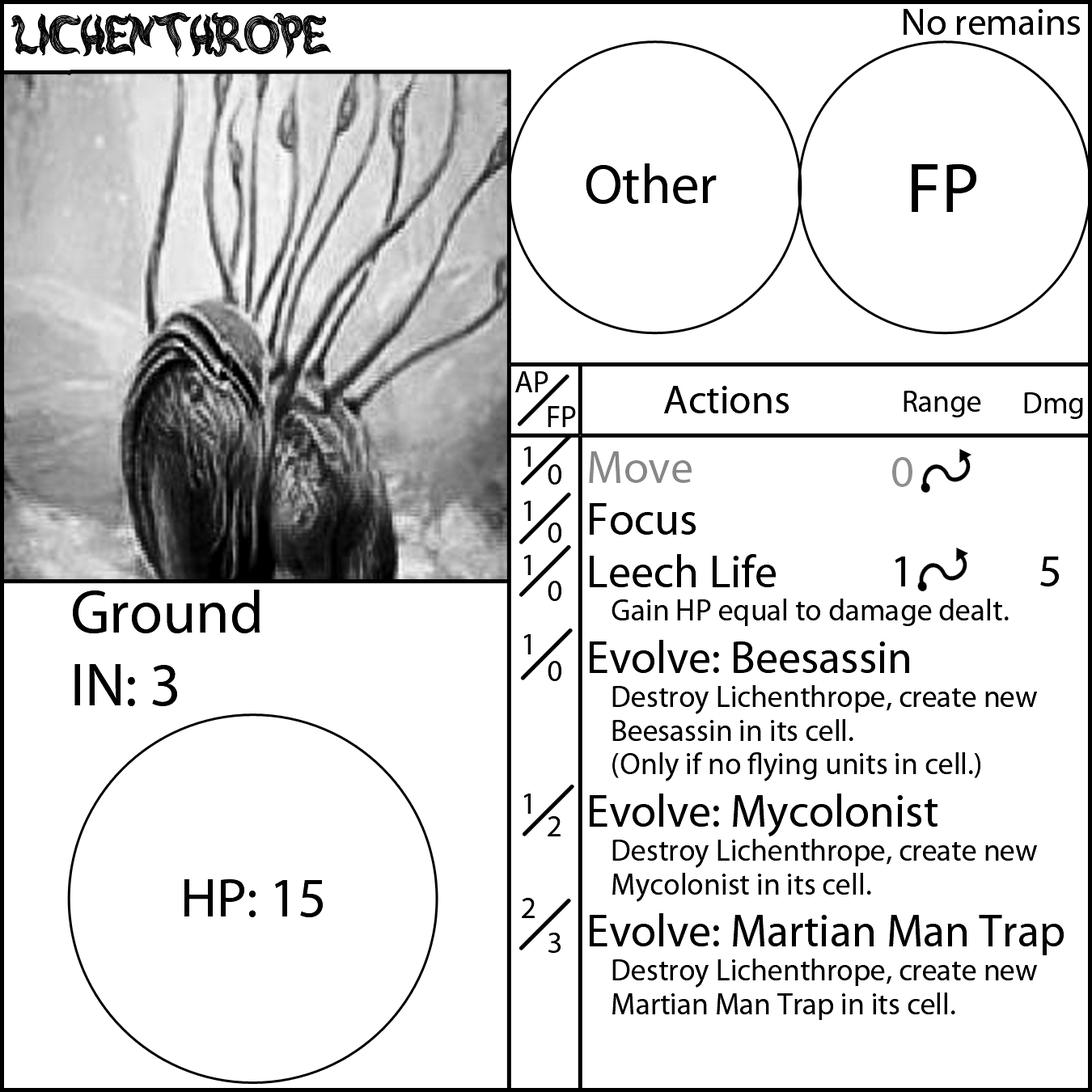
<style>
.page{position:relative;width:1092px;height:1092px;background:#ffffff}
.page>*{position:absolute;margin:0}
.t1{font:55.6px "rambutkusut";color:#000000}
.t2{font:37.9px "MyriadPro-Regular";color:#000000}
.t3{font:55.6px "MyriadPro-Regular";color:#000000}
.t4{font:70.8px "MyriadPro-Regular";color:#000000}
.t5{font:30.3px "MyriadPro-Regular";color:#000000}
.t6{font:40.4px "MyriadPro-Regular";color:#000000}
.t7{font:45.5px "MyriadPro-Regular";color:#949494}
.t8{font:45.5px "MyriadPro-Regular";color:#000000}
.t9{font:45.5px "MyriadPro-Regular";color:#9a9a9a}
.t10{font:60.7px "MyriadPro-Regular";color:#000000}
</style>
<div class="page">
<p class="t1" style="left:11px;top:12px;width:320px;height:46px">Lichenthrope</p>
<p class="t2" style="left:904px;top:9px;width:176px;height:26px">No remains</p>
<p class="t3" style="left:586px;top:163px;width:131px;height:41px">Other</p>
<p class="t4" style="left:912px;top:164px;width:64px;height:48px">FP</p>
<p class="t5" style="left:515px;top:371px;width:33px;height:21px">AP</p>
<p class="t6" style="left:664px;top:386px;width:125px;height:27px">Actions</p>
<p class="t5" style="left:904px;top:391px;width:77px;height:26px">Range</p>
<p class="t5" style="left:1024px;top:392px;width:59px;height:27px">Dmg</p>
<p class="t5" style="left:548px;top:406px;width:28px;height:21px">FP</p>
<p class="t5" style="left:522px;top:447px;width:13px;height:471px">1<br>1<br>1<br>1<br><br><br>1<br><br>2</p>
<p class="t5" style="left:589px;top:451px;width:475px;height:569px"><span class="t7">Move<br></span><span class="t8">Focus<br>Leech Life<br></span> Gain HP equal to damage dealt.<br><span class="t8">Evolve: Beesassin<br></span> Destroy Lichenthrope, create new <br> Beesassin in its cell.<br> (Only if no flying units in cell.)<br><span class="t8">Evolve: Mycolonist<br></span> Destroy Lichenthrope, create new <br> Mycolonist in its cell.<br><span class="t8">Evolve: Martian Man Trap<br></span> Destroy Lichenthrope, create new <br> Martian Man Trap in its cell.</p>
<p class="t9" style="left:892px;top:457px;width:20px;height:129px;text-align:center">0<br><span class="t8"><br>1</span></p>
<p class="t5" style="left:548px;top:464px;width:13px;height:489px">0<br>0<br>0<br>0<br><br>2<br><br>3</p>
<p class="t8" style="left:1040px;top:557px;width:19px;height:29px">5</p>
<p class="t10" style="left:73px;top:590px;width:187px;height:116px">Ground<br>IN: 3</p>
<p class="t3" style="left:184px;top:879px;width:139px;height:38px">HP: 15</p>
</div>
